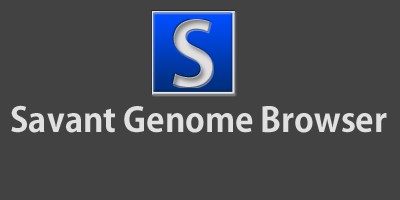
<style>
.page{position:relative;width:400px;height:200px;background:#424242}
.page>*{position:absolute;margin:0}
.t1{font:87px "AdobeGothicStd-Bold"}
.t2{font:33.3px "AdobeGothicStd-Bold";color:#e0e0e0}
</style>
<div class="page">
<p class="t1" style="left:172px;top:19px;width:42px;height:69px">S</p>
<p class="t2" style="left:11px;top:105px;width:376px;height:28px">Savant Genome Browser</p>
</div>
